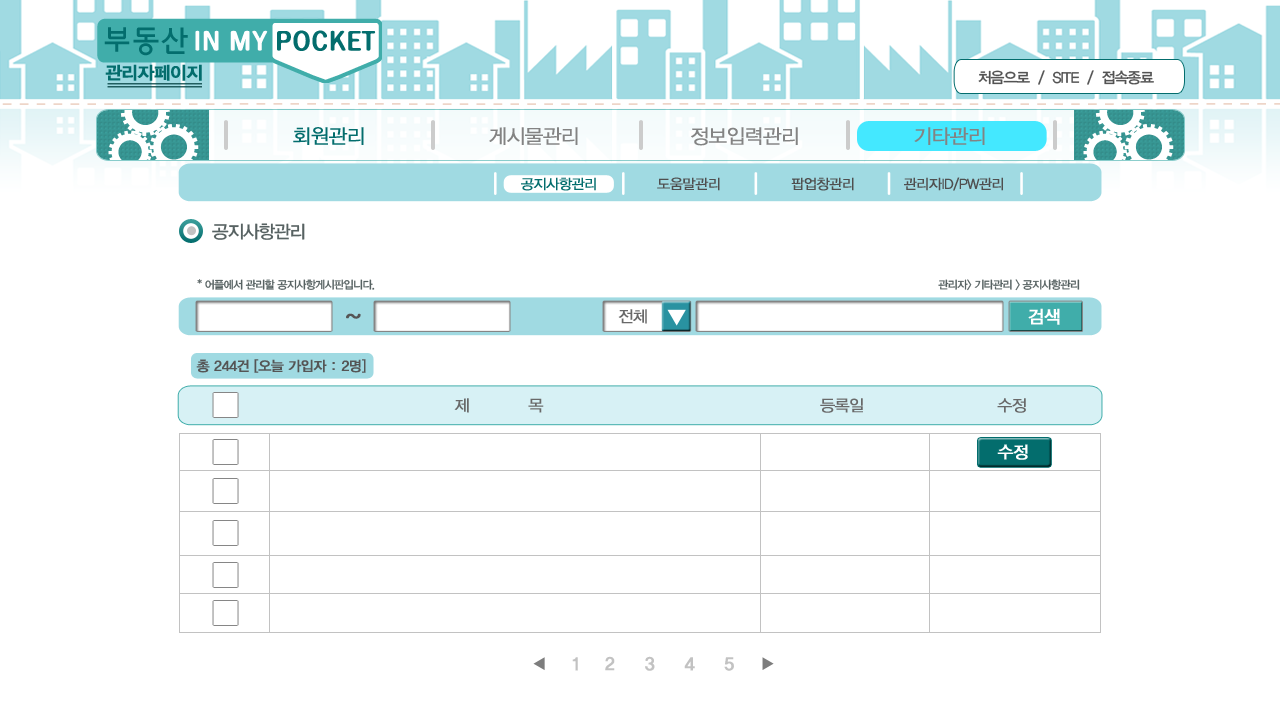
<style>
.page{position:relative;width:1280px;height:720px;background:#ffffff}
.page>*{position:absolute;margin:0}
.t1{font:17.8px "YDIYGO340";letter-spacing:-0.04em;color:#036d6d;font-weight:bold}
.t2{font:15px "YDIYGO330";letter-spacing:-0.06em;color:#535353}
.t3{font:20px "YDIYGO320";letter-spacing:-0.04em;color:#036d6d;font-weight:bold}
.t4{font:20px "YDIYGO320";letter-spacing:-0.04em;color:#838383;font-weight:bold}
.t5{font:14px "YDIYGO320";letter-spacing:-0.04em;color:#036d6d;font-weight:bold}
.t6{font:14px "YDIYGO320";letter-spacing:-0.04em;color:#4f4f4f;font-weight:bold}
.t7{font:18px "YDIYGO330";letter-spacing:-0.06em;color:#576262}
.t8{font:11px "YDIYGO330";letter-spacing:-0.06em;color:#576262}
.t9{font:23.8px "FBsky-Medium--KSCpc-EUC-H";letter-spacing:-0.04em;color:#555555;font-weight:bold}
.t10{font:16px "YDIYGO320";letter-spacing:-0.04em;color:#696969;font-weight:bold}
.t11{font:17.8px "YDIYGO330";letter-spacing:-0.04em;color:#ffffff;font-weight:bold}
.t12{font:13.8px "YDIYGO330";letter-spacing:-0.04em;color:#555555;font-weight:bold}
.t13{font:16.8px "YDIYGO330";letter-spacing:-0.04em;color:#ffffff;font-weight:bold}
.t14{font:17.8px "YDIYGO340";letter-spacing:-0.04em;color:#c2c2c2;font-weight:bold}
</style>
<div class="page">
<p class="t1" style="left:105px;top:64px;width:97px;height:17px">관리자페이지</p>
<p class="t2" style="left:978px;top:70px;width:176px;height:15px">처음으로  /  SITE  /  접속종료</p>
<p class="t3" style="left:293px;top:127px;width:71px;height:18px">회원관리</p>
<p class="t4" style="left:489px;top:127px;width:89px;height:18px">게시물관리</p>
<p class="t4" style="left:691px;top:127px;width:107px;height:19px">정보입력관리</p>
<p class="t4" style="left:914px;top:127px;width:71px;height:18px">기타관리</p>
<p class="t5" style="left:521px;top:177px;width:75px;height:14px">공지사항관리</p>
<p class="t6" style="left:657px;top:177px;width:63px;height:14px">도움말관리</p>
<p class="t6" style="left:791px;top:177px;width:63px;height:14px">팝업창관리</p>
<p class="t6" style="left:904px;top:177px;width:99px;height:14px">관리자ID/PW관리</p>
<p class="t7" style="left:212px;top:223px;width:93px;height:17px">공지사항관리</p>
<p class="t8" style="left:197px;top:279px;width:178px;height:11px">* 어플에서 관리할 공지사항게시판입니다.</p>
<p class="t8" style="left:938px;top:279px;width:142px;height:12px">관리자&gt; 기타관리 &gt; 공지사항관리</p>
<p class="t9" style="left:346px;top:313px;width:15px;height:6px">~</p>
<p class="t10" style="left:618px;top:309px;width:29px;height:15px">전체</p>
<p class="t11" style="left:1028px;top:308px;width:32px;height:17px">검색</p>
<p class="t12" style="left:196px;top:359px;width:170px;height:14px">총 244건 [오늘 가입자 : 2명]</p>
<p class="t10" style="left:454px;top:398px;width:90px;height:15px">제           목</p>
<p class="t10" style="left:820px;top:398px;width:43px;height:15px">등록일</p>
<p class="t10" style="left:997px;top:398px;width:29px;height:15px">수정</p>
<p class="t13" style="left:997px;top:444px;width:31px;height:16px">수정</p>
<p class="t14" style="left:572px;top:656px;width:162px;height:15px">1    2     3     4     5</p>
</div>
